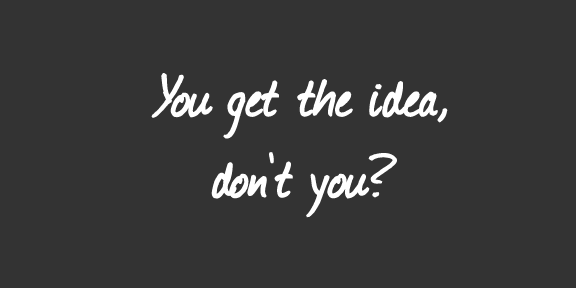
<style>
.page{position:relative;width:576px;height:288px;background:#333333}
.page>*{position:absolute;margin:0}
.t1{font:67.6px "Journal";color:#ffffff;font-weight:bold}
</style>
<div class="page">
<p class="t1" style="left:151px;top:73px;width:297px;height:145px;text-align:center">You get the idea,<br>don’t you?</p>
</div>
